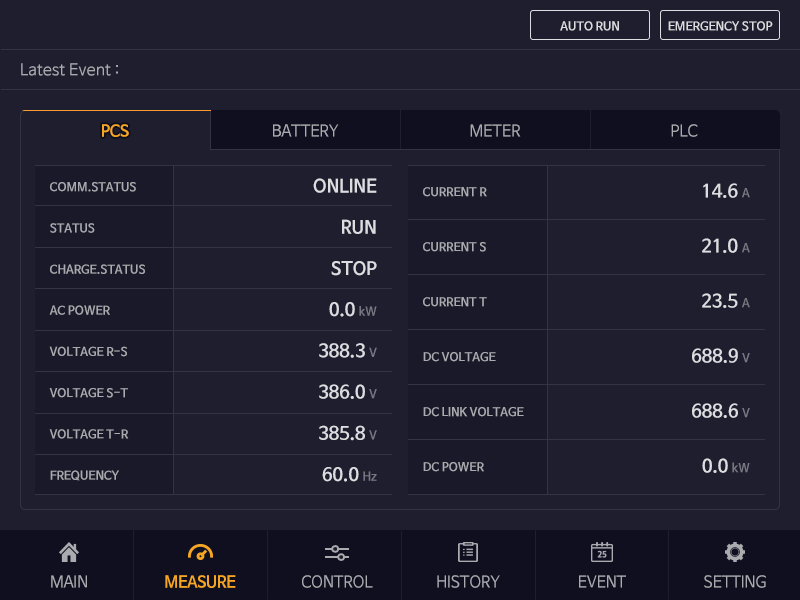
<style>
.page{position:relative;width:800px;height:600px;background:#1e1e2f}
.page>*{position:absolute;margin:0}
.t1{font:12px "NanumBarunGothicBold";color:#dcdce1}
.t2{font:16px "NanumBarunGothic";color:#aaaaaf}
.t3{font:16px "NanumBarunGothic";letter-spacing:-0.025em;color:#f5a623}
.t4{font:16px "NanumBarunGothicBold";letter-spacing:-0.025em;color:#f5a623}
.t5{font:16px "NanumBarunGothic";letter-spacing:-0.025em;color:#aaaaaf}
.t6{font:12px/41.2px "NanumBarunGothicBold";color:#aaaaaf}
.t7{font:18px/41.2px "NanumBarunGothicBold";color:#dcdce1}
.t8{font:12px/41.2px "NanumBarunGothicBold";color:#787882}
.t9{font:18px/55px "NanumBarunGothicBold";color:#dcdce1}
.t10{font:12px/55px "NanumBarunGothicBold";color:#787882}
.t11{font:12px/55px "NanumBarunGothicBold";color:#aaaaaf}
</style>
<div class="page">
<p class="t1" style="left:560px;top:21px;width:59px;height:10px">AUTO RUN</p>
<p class="t1" style="left:668px;top:21px;width:105px;height:10px">EMERGENCY STOP</p>
<p class="t2" style="left:21px;top:63px;width:97px;height:13px">Latest Event :</p>
<p class="t3" style="left:102px;top:124px;width:27px;height:13px">PCS</p>
<p class="t4" style="left:102px;top:124px;width:27px;height:13px">PCS</p>
<p class="t5" style="left:273px;top:124px;width:66px;height:13px">BATTERY</p>
<p class="t5" style="left:470px;top:124px;width:51px;height:13px">METER</p>
<p class="t5" style="left:671px;top:124px;width:27px;height:13px">PLC</p>
<p class="t6" style="left:49px;top:182px;width:96px;height:299px">COMM.STATUS<br>STATUS<br>CHARGE.STATUS<br>AC POWER<br>VOLTAGE R-S<br>VOLTAGE S-T<br>VOLTAGE T-R<br>FREQUENCY</p>
<p class="t7" style="left:313px;top:178px;width:64px;height:304px;text-align:right">ONLINE<br>RUN<br>STOP<br>0.0 <span class="t8">kW<br></span>388.3 <span class="t8">V<br></span>386.0 <span class="t8">V<br></span>385.8 <span class="t8">V<br></span>60.0 <span class="t8">Hz</span></p>
<p class="t9" style="left:692px;top:183px;width:58px;height:290px;text-align:right">14.6 <span class="t10">A<br></span>21.0 <span class="t10">A<br></span>23.5 <span class="t10">A<br></span>688.9 <span class="t10">V<br></span>688.6 <span class="t10">V<br></span>0.0 <span class="t10">kW</span></p>
<p class="t11" style="left:423px;top:187px;width:101px;height:285px">CURRENT R<br>CURRENT S<br>CURRENT T<br>DC VOLTAGE<br>DC LINK VOLTAGE<br>DC POWER</p>
<p class="t5" style="left:51px;top:575px;width:36px;height:13px">MAIN</p>
<p class="t4" style="left:165px;top:575px;width:71px;height:13px">MEASURE</p>
<p class="t5" style="left:302px;top:575px;width:71px;height:13px">CONTROL</p>
<p class="t5" style="left:437px;top:575px;width:63px;height:13px">HISTORY</p>
<p class="t5" style="left:579px;top:575px;width:47px;height:13px">EVENT</p>
<p class="t5" style="left:704px;top:575px;width:62px;height:13px">SETTING</p>
</div>
